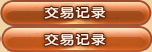
<style>
.page{position:relative;width:152px;height:52px}
.page>*{position:absolute;margin:0}
.t1{font:12px "HYe3gj";letter-spacing:0.05em;color:#ffeee1;font-weight:bold;scale:1.2 1}
</style>
<div class="page">
<p class="t1" style="left:44px;top:6px;width:62px;height:13px">交易记录</p>
<p class="t1" style="left:44px;top:33px;width:62px;height:13px">交易记录</p>
</div>
